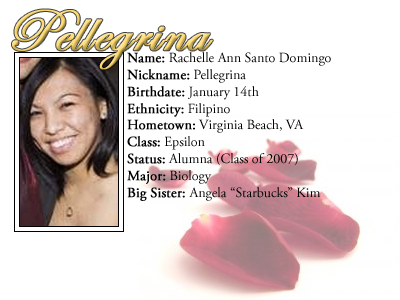
<style>
.page{position:relative;width:400px;height:300px;background:#ffffff}
.page>*{position:absolute;margin:0}
.t1{font:14px "AGaramondPro-Regular";color:#000000}
.t2{font:14px "AGaramondPro-Regular";color:#000000;font-weight:bold}
</style>
<div class="page">
<p class="t1" style="left:127px;top:52px;width:204px;height:149px"><span class="t2">Name:</span> Rachelle Ann Santo Domingo<br><span class="t2">Nickname:</span> Pellegrina<br><span class="t2">Birthdate:</span> January 14th<br><span class="t2">Ethnicity:</span> Filipino<br><span class="t2">Hometown:</span> Virginia Beach, VA<br><span class="t2">Class:</span> Epsilon<br><span class="t2">Status:</span> Alumna (Class of 2007)<br><span class="t2">Major:</span> Biology<br><span class="t2">Big Sister: </span>Angela “Starbucks” Kim</p>
</div>
